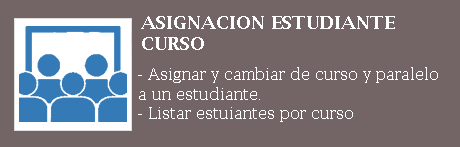
<style>
.page{position:relative;width:460px;height:147px;background:#736565}
.page>*{position:absolute;margin:0}
.t1{font:18px "LucidaBright-Demi";color:#ffffff}
.t2{font:16px "LucidaBright";color:#ffffff}
</style>
<div class="page">
<p class="t1" style="left:141px;top:16px;width:254px;height:34px">ASIGNACION ESTUDIANTE CURSO</p>
<p class="t2" style="left:138px;top:67px;width:300px;height:55px">- Asignar y cambiar de curso y paralelo a un estudiante.<br>- Listar estuiantes por curso</p>
</div>
